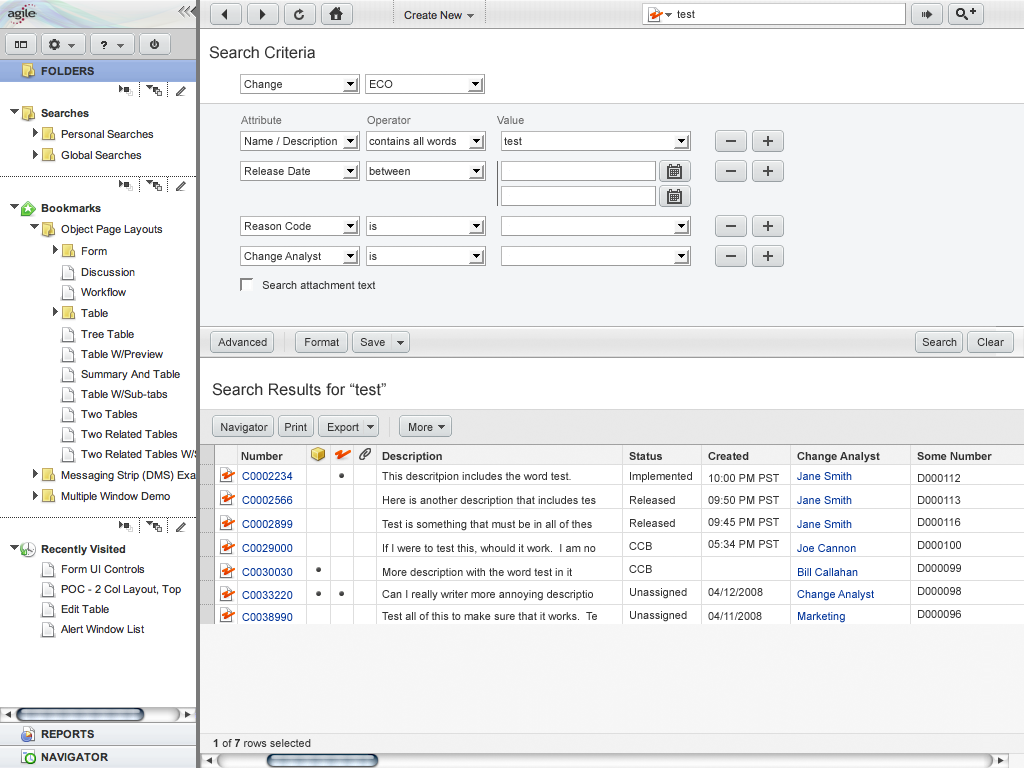
<style>
.page{position:relative;width:1024px;height:768px;background:#ffffff}
.page>*{position:absolute;margin:0}
.t1{font:11px "ArialMT";color:#303030}
.t2{font:16px "ArialMT";color:#333333}
.t3{font:11px "ArialMT";color:#666666}
.t4{font:16px "ArialMT";letter-spacing:0.005em;color:#303030}
.t5{font:11px "Arial-BoldMT";color:#303030}
.t6{font:11px/24px "ArialMT";color:#303030}
.t7{font:11px/20px "Arial-BoldMT";color:#303030}
.t8{font:11px/20px "ArialMT";color:#303030}
.t9{font:11px/22px "ArialMT";color:#303030}
.t10{font:11px/23px "ArialMT";color:#303030}
.t11{font:11px/22px "ArialMT";color:#333333}
.t12{font:11px/24px "ArialMT";color:#333333}
.t13{font:11px/24px "ArialMT";color:#003399}
.t14{font:11px/20px "ArialMT";color:#003399}
.t15{font:11px/22px "ArialMT";color:#003399}
.t16{font:11px/23px "ArialMT";color:#333333}
.t17{font:11px/23px "ArialMT";color:#003399}
</style>
<div class="page">
<p class="t1" style="left:677px;top:10px;width:18px;height:8px">test</p>
<p class="t2" style="left:209px;top:46px;width:106px;height:13px">Search Criteria</p>
<p class="t1" style="left:244px;top:80px;width:38px;height:11px">Change</p>
<p class="t1" style="left:370px;top:80px;width:23px;height:8px">ECO</p>
<p class="t3" style="left:241px;top:116px;width:41px;height:8px">Attribute</p>
<p class="t3" style="left:367px;top:116px;width:44px;height:11px">Operator</p>
<p class="t3" style="left:497px;top:116px;width:27px;height:8px">Value</p>
<p class="t1" style="left:245px;top:137px;width:92px;height:11px">Name / Description</p>
<p class="t1" style="left:369px;top:137px;width:87px;height:8px">contains all words</p>
<p class="t1" style="left:504px;top:137px;width:18px;height:8px">test</p>
<p class="t1" style="left:245px;top:167px;width:65px;height:8px">Release Date</p>
<p class="t1" style="left:369px;top:167px;width:41px;height:8px">between</p>
<p class="t1" style="left:245px;top:222px;width:66px;height:8px">Reason Code</p>
<p class="t1" style="left:369px;top:222px;width:8px;height:8px">is</p>
<p class="t1" style="left:244px;top:252px;width:77px;height:11px">Change Analyst</p>
<p class="t1" style="left:369px;top:252px;width:8px;height:8px">is</p>
<p class="t1" style="left:262px;top:281px;width:114px;height:8px">Search attachment text</p>
<p class="t1" style="left:218px;top:338px;width:49px;height:8px">Advanced</p>
<p class="t1" style="left:305px;top:338px;width:34px;height:8px">Format</p>
<p class="t1" style="left:360px;top:338px;width:25px;height:8px">Save</p>
<p class="t1" style="left:922px;top:338px;width:35px;height:8px">Search</p>
<p class="t1" style="left:977px;top:338px;width:27px;height:8px">Clear</p>
<p class="t4" style="left:212px;top:383px;width:174px;height:13px">Search Results for “test”</p>
<p class="t1" style="left:221px;top:423px;width:47px;height:11px">Navigator</p>
<p class="t1" style="left:285px;top:423px;width:22px;height:8px">Print</p>
<p class="t1" style="left:328px;top:423px;width:31px;height:11px">Export</p>
<p class="t1" style="left:409px;top:423px;width:24px;height:8px">More</p>
<p class="t5" style="left:241px;top:452px;width:42px;height:8px">Number</p>
<p class="t6" style="left:382px;top:452px;width:215px;height:168px"><span class="t7">Description<br></span><span class="t8">This descritpion includes the word test.<br></span>Here is another description that includes tes <br>Test is something that must be in all of thes<br>If I were to test this, whould it work.  I am no<br>More description with the word test in it<br><span class="t9">Can I really writer more annoying descriptio<br>Test all of this to make sure that it works.  Te</span></p>
<p class="t10" style="left:629px;top:452px;width:63px;height:170px"><span class="t7">Status<br></span><span class="t8">Implemented<br>Released <br></span>Released<br>CCB<br>CCB<br>Unassigned<br>Unassigned</p>
<p class="t11" style="left:708px;top:452px;width:71px;height:168px"><span class="t7">Created<br></span>10:00 PM PST<br>09:50 PM PST<br>09:45 PM PST<br>05:34 PM PST<br><span class="t12"><br>04/12/2008<br>04/11/2008</span></p>
<p class="t13" style="left:797px;top:452px;width:83px;height:171px"><span class="t7">Change Analyst<br></span><span class="t14">Jane Smith<br></span>Jane Smith <br>Jane Smith<br>Joe Cannon<br>Bill Callahan<br><span class="t15">Change Analyst<br>Marketing</span></p>
<p class="t16" style="left:917px;top:452px;width:75px;height:166px"><span class="t7">Some Number<br></span><span class="t11">D000112<br>D000113<br>D000116<br></span>D000100<br>D000099<br>D000098<br>D000096</p>
<p class="t13" style="left:242px;top:472px;width:51px;height:149px"><span class="t14">C0002234<br></span>C0002566<br>C0002899<br>C0029000<br>C0030030<br><span class="t17">C0033220<br></span><span class="t15">C0038990</span></p>
<p class="t1" style="left:213px;top:739px;width:98px;height:8px"><span class="t5">1</span> of <span class="t5">7</span> rows selected</p>
</div>
